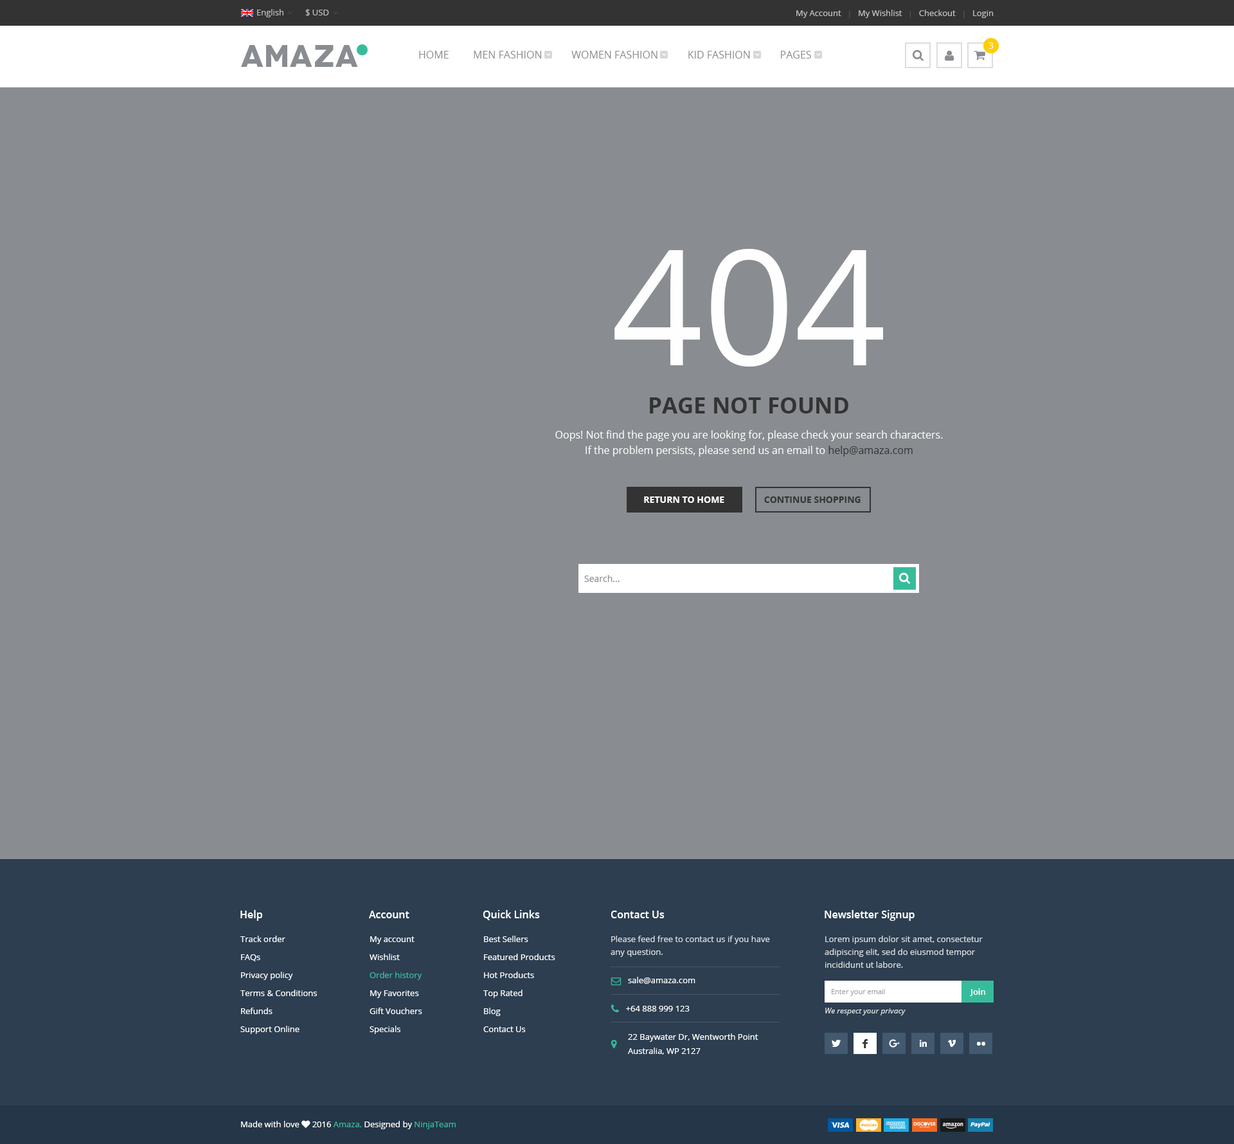
<style>
.page{position:relative;width:1234px;height:1144px;background:#898c90}
.page>*{position:absolute;margin:0}
.t1{font:8.4px "OpenSans";color:#bdbdbf}
.t2{font:8.4px "OpenSans";color:#bebebf}
.t3{font:7.1px "OpenSans";color:#595959}
.t4{font:30.9px "Novecentowide-Bold";letter-spacing:0.025em;color:#898c90;text-transform:uppercase}
.t5{font:10.3px "OpenSans";color:#898c90;text-transform:uppercase}
.t6{font:9px "OpenSans";letter-spacing:0.025em;color:#ffffff;text-transform:uppercase}
.t7{font:160.7px "OpenSans";color:#fffefe}
.t8{font:22.5px "OpenSans-Bold";color:#333333;text-transform:uppercase}
.t9{font:10.3px/15.4px "OpenSans";color:#ffffff}
.t10{font:10.3px/15.4px "OpenSans";color:#333333}
.t11{font:9px "OpenSans-Bold";color:#ffffff;text-transform:uppercase}
.t12{font:9px "OpenSans-Bold";color:#333333;text-transform:uppercase}
.t13{font:9px "OpenSans";color:#898c90}
.t14{font:10.3px "OpenSans-Semibold";color:#ffffff}
.t15{font:8.4px/18px "OpenSans";color:#ffffff}
.t16{font:8.4px/18px "OpenSans";color:#37bc9b}
.t17{font:8.4px/14.1px "OpenSans";color:#ffffff}
.t18{font:8.4px/12.9px "OpenSans";color:#dbddde}
.t19{font:7.1px "OpenSans";color:#a3a2a2}
.t20{font:8.4px "OpenSans-Semibold";color:#ffffff}
</style>
<div class="page">
<p class="t1" style="left:257px;top:9px;width:27px;height:8px">English</p>
<p class="t1" style="left:305px;top:9px;width:24px;height:7px">$ USD</p>
<p class="t2" style="left:797px;top:10px;width:197px;height:8px">My Account   <span class="t3">|</span>   My Wishlist   <span class="t3">|</span>   Checkout   <span class="t3">| </span>  Login</p>
<p class="t4" style="left:241px;top:45px;width:117px;height:22px">AMAZA</p>
<p class="t5" style="left:419px;top:51px;width:392px;height:8px">Home         Men Fashion           Women Fashion           Kid Fashion           Pages</p>
<p class="t6" style="left:989px;top:42px;width:5px;height:7px">3</p>
<p class="t7" style="left:615px;top:249px;width:268px;height:117px">404</p>
<p class="t8" style="left:650px;top:397px;width:199px;height:16px">Page not found</p>
<p class="t9" style="left:555px;top:430px;width:388px;height:26px;text-align:center">Oops! Not find the page you are looking for, please check your search characters.<br>If the problem persists, please send us an email to <span class="t10">help@amaza.com</span></p>
<p class="t11" style="left:644px;top:496px;width:80px;height:7px">Return To Home</p>
<p class="t12" style="left:764px;top:496px;width:97px;height:7px">Continue Shopping</p>
<p class="t13" style="left:584px;top:575px;width:36px;height:7px">Search...</p>
<p class="t14" style="left:240px;top:910px;width:22px;height:11px">Help</p>
<p class="t14" style="left:369px;top:910px;width:41px;height:8px">Account</p>
<p class="t14" style="left:483px;top:910px;width:57px;height:10px">Quick Links</p>
<p class="t14" style="left:611px;top:910px;width:54px;height:8px">Contact Us</p>
<p class="t14" style="left:825px;top:910px;width:90px;height:11px">Newsletter Signup</p>
<p class="t15" style="left:240px;top:935px;width:77px;height:99px">Track order<br>FAQs<br>Privacy policy<br>Terms &amp; Conditions<br>Refunds<br>Support Online</p>
<p class="t15" style="left:370px;top:936px;width:52px;height:98px">My account<br>Wishlist<br><span class="t16">Order history<br></span>My Favorites<br>Gift Vouchers<br>Specials</p>
<p class="t15" style="left:483px;top:935px;width:72px;height:97px">Best Sellers<br>Featured Products<br>Hot Products<br>Top Rated<br>Blog<br>Contact Us</p>
<p class="t17" style="left:611px;top:935px;width:159px;height:119px"><span class="t18">Please feed free to contact us if you have any question.<br></span><br>        sale@amaza.com<br><br>       +64 888 999 123<br><br>        22 Baywater Dr, Wentworth Point<br>        Australia, WP 2127</p>
<p class="t19" style="left:832px;top:989px;width:53px;height:7px">Enter your email</p>
<p class="t20" style="left:969px;top:988px;width:17px;height:8px">Join</p>
</div>
